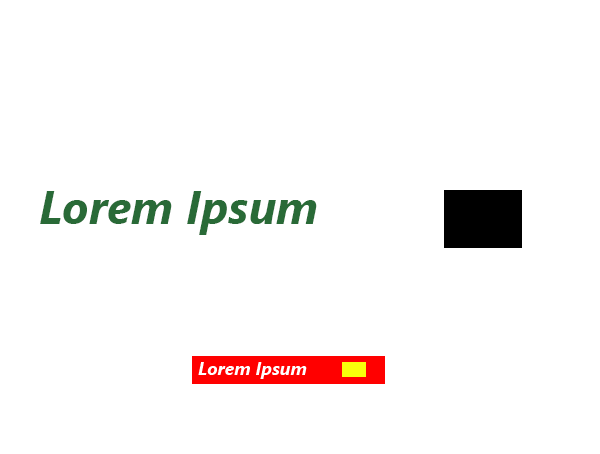
<style>
.page{position:relative;width:600px;height:454px;background:#ffffff}
.page>*{position:absolute;margin:0}
.t1{font:46.3px "SegoeUI-BoldItalic";color:#296a37}
</style>
<div class="page">
<p class="t1" style="left:40px;top:191px;width:277px;height:44px">Lorem Ipsum</p>
</div>
